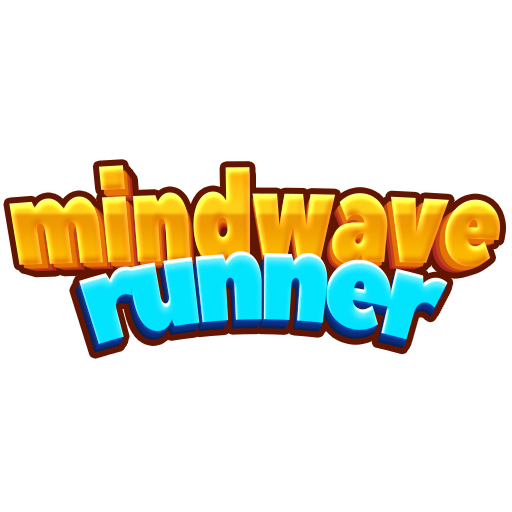
<style>
.page{position:relative;width:512px;height:512px;background:#ffffff}
.page>*{position:absolute;margin:0}
.t1{font:115px "PeaceSans";letter-spacing:-0.025em;scale:0.83 1}
.t2{font:112.7px "PeaceSans";letter-spacing:-0.025em;scale:0.83 1}
.t3{font:111.6px "PeaceSans";letter-spacing:-0.025em;scale:0.83 1}
.t4{font:110.5px "PeaceSans";letter-spacing:-0.025em;scale:0.83 1}
.t5{font:109.4px "PeaceSans";letter-spacing:-0.025em;scale:0.83 1}
.t6{font:108.3px "PeaceSans";letter-spacing:-0.025em;scale:0.83 1}
.t7{font:124.6px "PeaceSans";letter-spacing:-0.075em;color:#02e3fd;scale:0.77 1}
</style>
<div class="page">
<p class="t1" style="left:9px;top:165px;width:491px;height:102px">mindwave</p>
<p class="t2" style="left:14px;top:170px;width:482px;height:100px">mindwave</p>
<p class="t3" style="left:16px;top:172px;width:477px;height:99px">mindwave</p>
<p class="t4" style="left:19px;top:173px;width:472px;height:98px">mindwave</p>
<p class="t5" style="left:21px;top:175px;width:467px;height:97px">mindwave</p>
<p class="t6" style="left:23px;top:176px;width:463px;height:96px">mindwave</p>
<p class="t7" style="left:79px;top:251px;width:369px;height:93px">runner</p>
</div>
